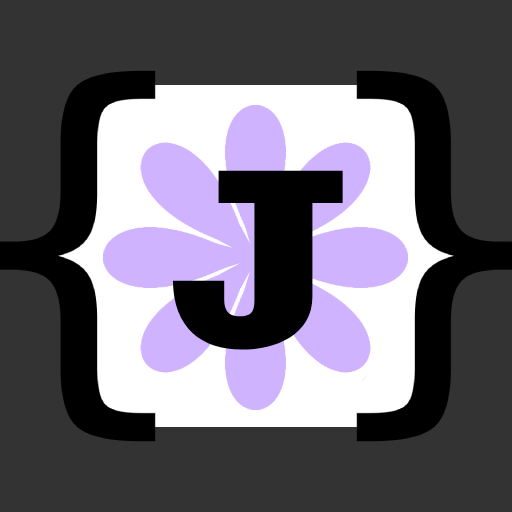
<style>
.page{position:relative;width:512px;height:512px;background:#333333}
.page>*{position:absolute;margin:0}
.t1{font:280px "Acknowledgement";color:#000000}
</style>
<div class="page">
<p class="t1" style="left:172px;top:170px;width:171px;height:180px">J</p>
</div>
